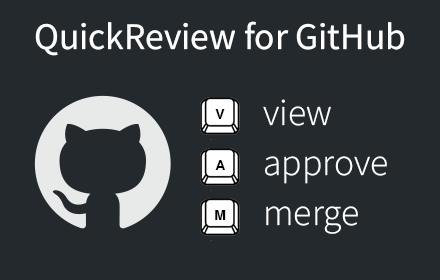
<style>
.page{position:relative;width:440px;height:280px;background:#24292e}
.page>*{position:absolute;margin:0}
.t1{font:37.5px "SourceSansRoman-Regular";color:#ffffff}
.t2{font:37.5px/50px "SourceSansRoman-Light";color:#ffffff}
.t3{font:14px "Helvetica-Bold";color:#000000}
</style>
<div class="page">
<p class="t1" style="left:35px;top:21px;width:370px;height:35px">QuickReview for GitHub</p>
<p class="t2" style="left:263px;top:99px;width:124px;height:135px">view<br>approve<br>merge</p>
<p class="t3" style="left:215px;top:109px;width:10px;height:10px">V</p>
<p class="t3" style="left:215px;top:160px;width:10px;height:10px">A</p>
<p class="t3" style="left:215px;top:210px;width:11px;height:10px">M</p>
</div>
